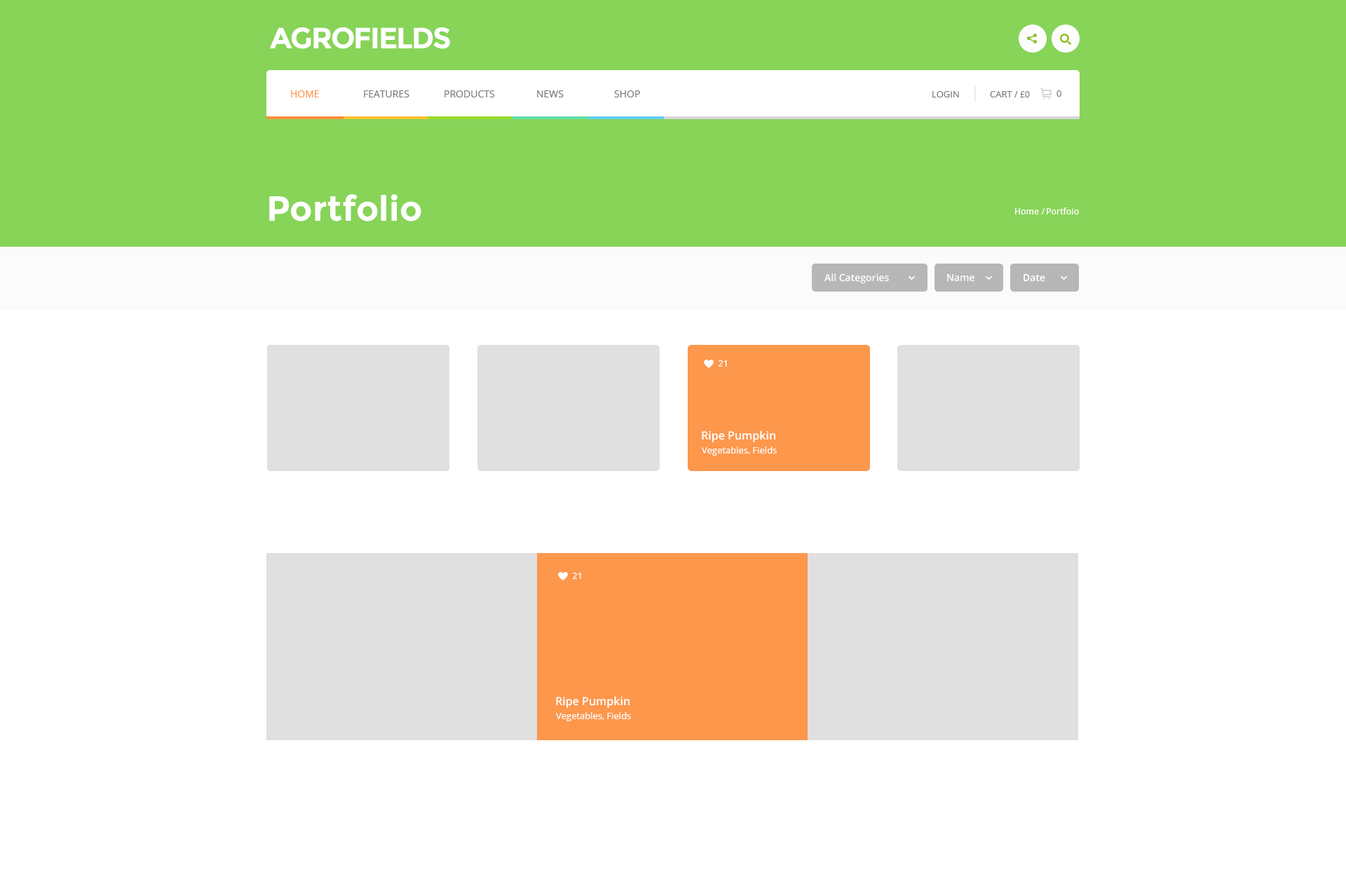
<style>
.page{position:relative;width:1346px;height:886px;background:#ffffff}
.page>*{position:absolute;margin:0}
.t1{font:29.4px "Montserrat-Bold";letter-spacing:-0.05em;color:#ffffff;text-transform:uppercase}
.t2{font:9.8px "OpenSans";color:#ff8f3c;text-transform:uppercase}
.t3{font:9.8px "OpenSans";color:#767676;text-transform:uppercase}
.t4{font:9.1px "OpenSans";color:#767676;text-transform:uppercase}
.t5{font:8.4px "OpenSans";color:#767676;text-transform:uppercase}
.t6{font:35px "Montserrat-Bold";color:#ffffff}
.t7{font:9.1px "DroidSans";color:#ffffff}
.t8{font:9.8px "OpenSans-Semibold";color:#ffffff}
.t9{font:11.2px "OpenSans-Semibold";color:#ffffff}
.t10{font:9.1px "OpenSans";color:#ffffff}
</style>
<div class="page">
<p class="t1" style="left:269px;top:27px;width:181px;height:22px">Agrofields</p>
<p class="t2" style="left:291px;top:90px;width:28px;height:7px">Home</p>
<p class="t3" style="left:364px;top:90px;width:45px;height:7px">Features</p>
<p class="t3" style="left:444px;top:90px;width:51px;height:7px">Products</p>
<p class="t3" style="left:537px;top:90px;width:27px;height:7px">News</p>
<p class="t3" style="left:614px;top:90px;width:26px;height:7px">Shop</p>
<p class="t4" style="left:932px;top:91px;width:27px;height:6px">Login</p>
<p class="t4" style="left:990px;top:91px;width:40px;height:6px">cart / <span class="t5">£0</span></p>
<p class="t4" style="left:1056px;top:90px;width:5px;height:7px">0</p>
<p class="t6" style="left:269px;top:194px;width:152px;height:28px">Portfolio</p>
<p class="t7" style="left:1015px;top:208px;width:30px;height:6px">Home /</p>
<p class="t7" style="left:1047px;top:207px;width:32px;height:7px">Portfoio</p>
<p class="t8" style="left:824px;top:273px;width:65px;height:11px">All Categories</p>
<p class="t8" style="left:947px;top:274px;width:27px;height:8px">Name</p>
<p class="t8" style="left:1023px;top:274px;width:22px;height:8px">Date</p>
<p class="t7" style="left:718px;top:360px;width:9px;height:7px">21</p>
<p class="t9" style="left:702px;top:430px;width:73px;height:12px">Ripe Pumpkin</p>
<p class="t10" style="left:702px;top:447px;width:75px;height:9px">Vegetables, Fields</p>
<p class="t7" style="left:573px;top:573px;width:8px;height:6px">21</p>
<p class="t9" style="left:556px;top:696px;width:73px;height:12px">Ripe Pumpkin</p>
<p class="t10" style="left:556px;top:712px;width:75px;height:9px">Vegetables, Fields</p>
</div>
